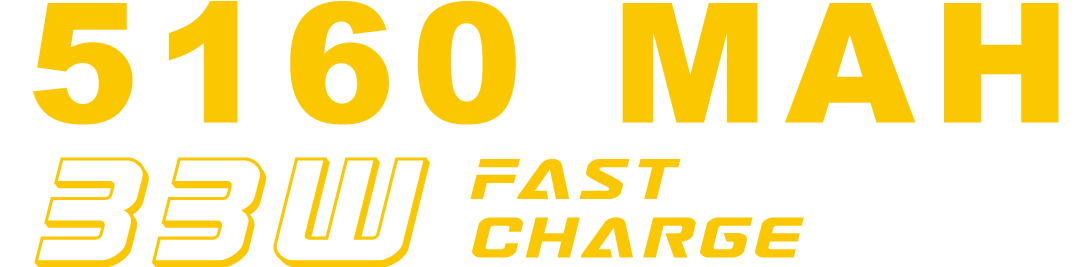
<style>
.page{position:relative;width:1087px;height:267px;background:#ffffff}
.page>*{position:absolute;margin:0}
.t1{font:166.7px "Arial-Black";letter-spacing:0.1em;color:#fbc700}
.t2{font:166.7px "AstroArmada3DItalic";letter-spacing:0.1em;color:#fbc700}
.t3{font:66.7px/58.3px "AstroArmadaExpandedItalic";letter-spacing:0.1em;color:#fbc700}
</style>
<div class="page">
<p class="t1" style="left:33px;top:1px;width:1026px;height:124px">5160 MAH</p>
<p class="t2" style="left:34px;top:157px;width:396px;height:111px">33W</p>
<p class="t3" style="left:470px;top:159px;width:334px;height:99px">Fast <br>Charge</p>
</div>
